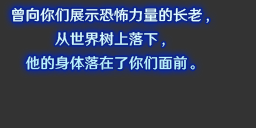
<style>
.page{position:relative;width:256px;height:128px;background:#333333}
.page>*{position:absolute;margin:0}
.t1{font:14.7px/24px "HYWenHei-FEW";letter-spacing:0.005em}
</style>
<div class="page">
<p class="t1" style="left:12px;top:7px;width:197px;height:63px;text-align:center">曾向你们展示恐怖力量的长老，<br>从世界树上落下，<br>他的身体落在了你们面前。</p>
</div>
